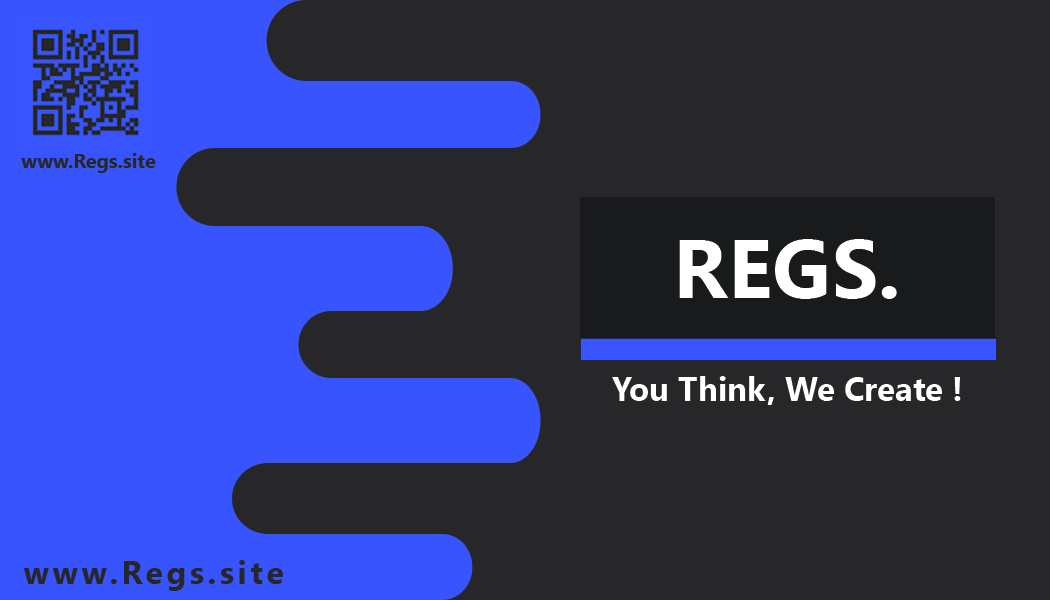
<style>
.page{position:relative;width:1050px;height:600px;background:#27272a}
.page>*{position:absolute;margin:0}
.t1{font:19.8px "SegoeUI-Bold";color:#27272a}
.t2{font:83.5px "SegoeUI-Bold";color:#ffffff}
.t3{font:32.9px "SegoeUI-Bold";color:#ffffff}
.t4{font:31.7px "SegoeUI-Bold";letter-spacing:0.12em;color:#27272a}
</style>
<div class="page">
<p class="t1" style="left:21px;top:153px;width:135px;height:20px">www.Regs.site</p>
<p class="t2" style="left:679px;top:239px;width:218px;height:60px">REGS.</p>
<p class="t3" style="left:612px;top:376px;width:349px;height:29px">You Think, We Create !</p>
<p class="t4" style="left:23px;top:560px;width:260px;height:31px">www.Regs.site</p>
</div>
